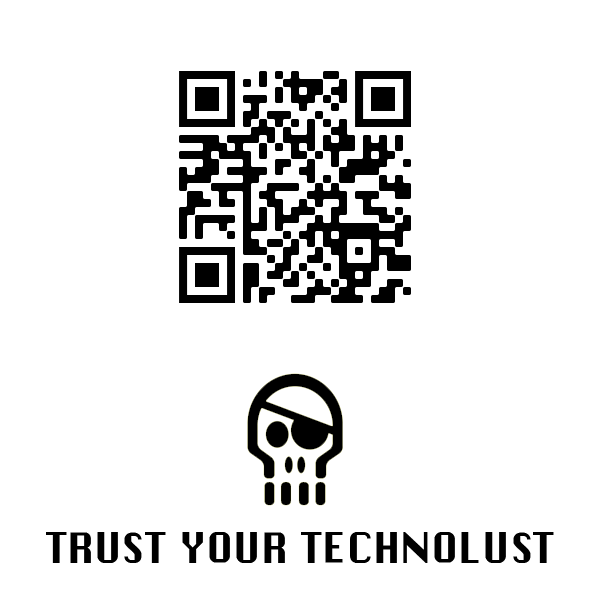
<style>
.page{position:relative;width:600px;height:600px;background:#ffffff}
.page>*{position:absolute;margin:0}
.t1{font:41px "ChicagoFLF";color:#000000}
</style>
<div class="page">
<p class="t1" style="left:46px;top:532px;width:508px;height:31px">TRUST YOUR TECHNOLUST</p>
</div>
